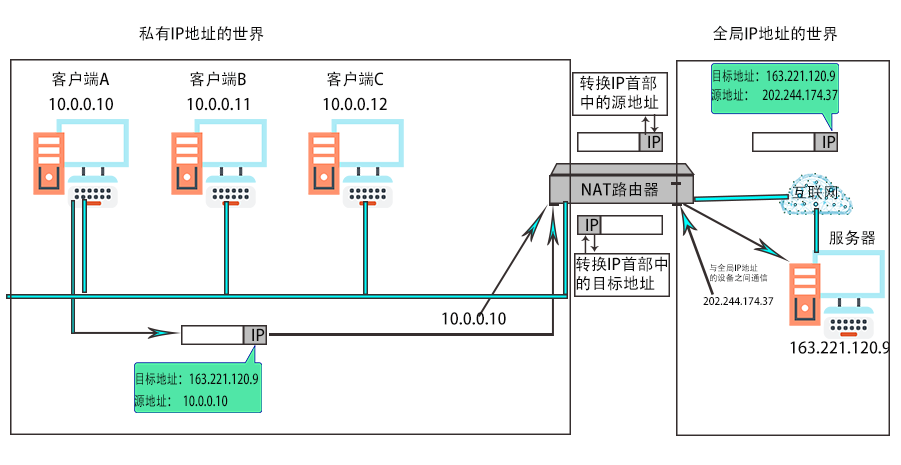
<style>
.page{position:relative;width:901px;height:465px;background:#ffffff}
.page>*{position:absolute;margin:0}
.t1{font:16px "AdobeHeitiStd-Regular";color:#0a0909}
.t2{font:13.8px "AdobeHeitiStd-Regular";color:#0a0909;scale:0.79 1}
.t3{font:16px "AdobeHeitiStd-Regular";color:#0a171b}
.t4{font:8.4px "AdobeHeitiStd-Regular";color:#0a0909}
.t5{font:10.2px "AdobeHeitiStd-Regular";color:#0a0909}
</style>
<div class="page">
<p class="t1" style="left:139px;top:26px;width:125px;height:15px">私有IP地址的世界</p>
<p class="t1" style="left:713px;top:25px;width:125px;height:16px">全局IP地址的世界</p>
<p class="t1" style="left:52px;top:71px;width:58px;height:16px">客户端A</p>
<p class="t1" style="left:190px;top:71px;width:56px;height:16px">客户端B</p>
<p class="t1" style="left:327px;top:71px;width:57px;height:16px">客户端C</p>
<p class="t1" style="left:580px;top:75px;width:79px;height:35px">转换IP首部<br>中的源地址</p>
<p class="t2" style="left:713px;top:69px;width:122px;height:14px">目标地址：163.221.120.9</p>
<p class="t2" style="left:711px;top:88px;width:127px;height:13px">源地址：   202.244.174.37</p>
<p class="t1" style="left:49px;top:97px;width:64px;height:14px">10.0.0.10</p>
<p class="t1" style="left:187px;top:97px;width:62px;height:14px">10.0.0.11</p>
<p class="t1" style="left:323px;top:97px;width:64px;height:14px">10.0.0.12</p>
<p class="t1" style="left:648px;top:135px;width:13px;height:13px">IP</p>
<p class="t1" style="left:823px;top:135px;width:13px;height:13px">IP</p>
<p class="t1" style="left:582px;top:182px;width:76px;height:15px">NAT路由器</p>
<p class="t3" style="left:792px;top:185px;width:46px;height:15px">互联网</p>
<p class="t1" style="left:586px;top:218px;width:13px;height:13px">IP</p>
<p class="t1" style="left:829px;top:230px;width:46px;height:16px">服务器</p>
<p class="t1" style="left:576px;top:256px;width:91px;height:35px">转换IP首部中<br>的目标地址</p>
<p class="t4" style="left:709px;top:263px;width:59px;height:19px">与全局IP地址<br>的设备之间通信</p>
<p class="t5" style="left:703px;top:297px;width:71px;height:8px">202.244.174.37</p>
<p class="t1" style="left:442px;top:312px;width:64px;height:13px">10.0.0.10</p>
<p class="t1" style="left:252px;top:328px;width:13px;height:13px">IP</p>
<p class="t1" style="left:790px;top:341px;width:100px;height:13px">163.221.120.9</p>
<p class="t2" style="left:136px;top:372px;width:122px;height:14px">目标地址：163.221.120.9</p>
<p class="t2" style="left:134px;top:394px;width:94px;height:13px">源地址：  10.0.0.10</p>
</div>
